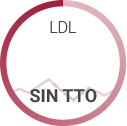
<style>
.page{position:relative;width:127px;height:126px;background:#ffffff}
.page>*{position:absolute;margin:0}
.t1{font:18px "Roboto-Bold";color:#434447}
</style>
<div class="page">
<p class="t1" style="left:30px;top:89px;width:67px;height:14px">SIN TTO</p>
</div>
